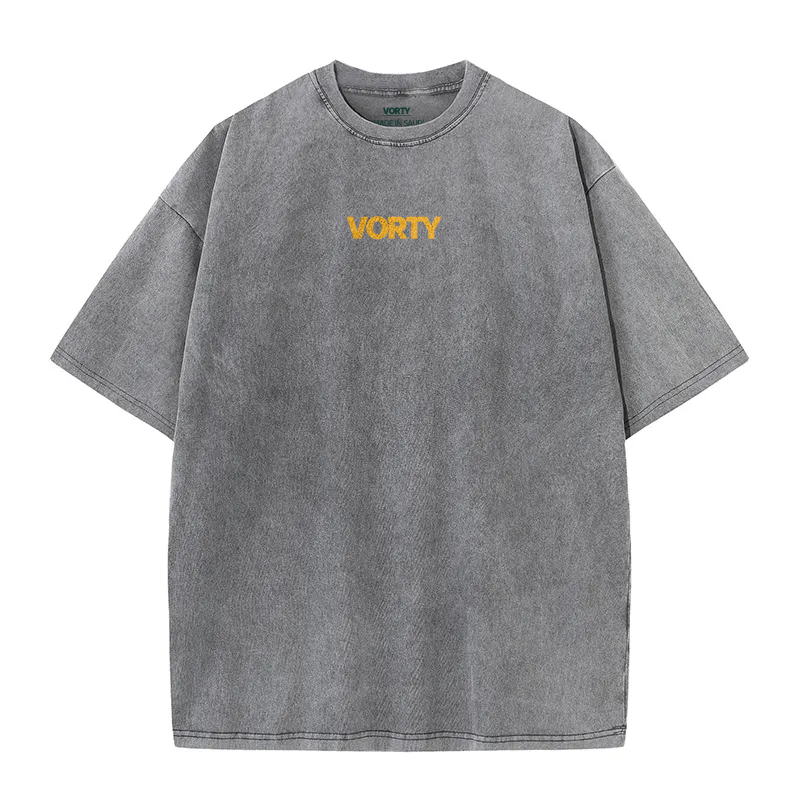
<style>
.page{position:relative;width:800px;height:800px;background:#ffffff}
.page>*{position:absolute;margin:0}
.t1{font:30px "aBlackLives";letter-spacing:-0.06em;color:#e3a529;text-transform:uppercase}
</style>
<div class="page">
<p class="t1" style="left:346px;top:216px;width:96px;height:24px">vorty</p>
</div>
